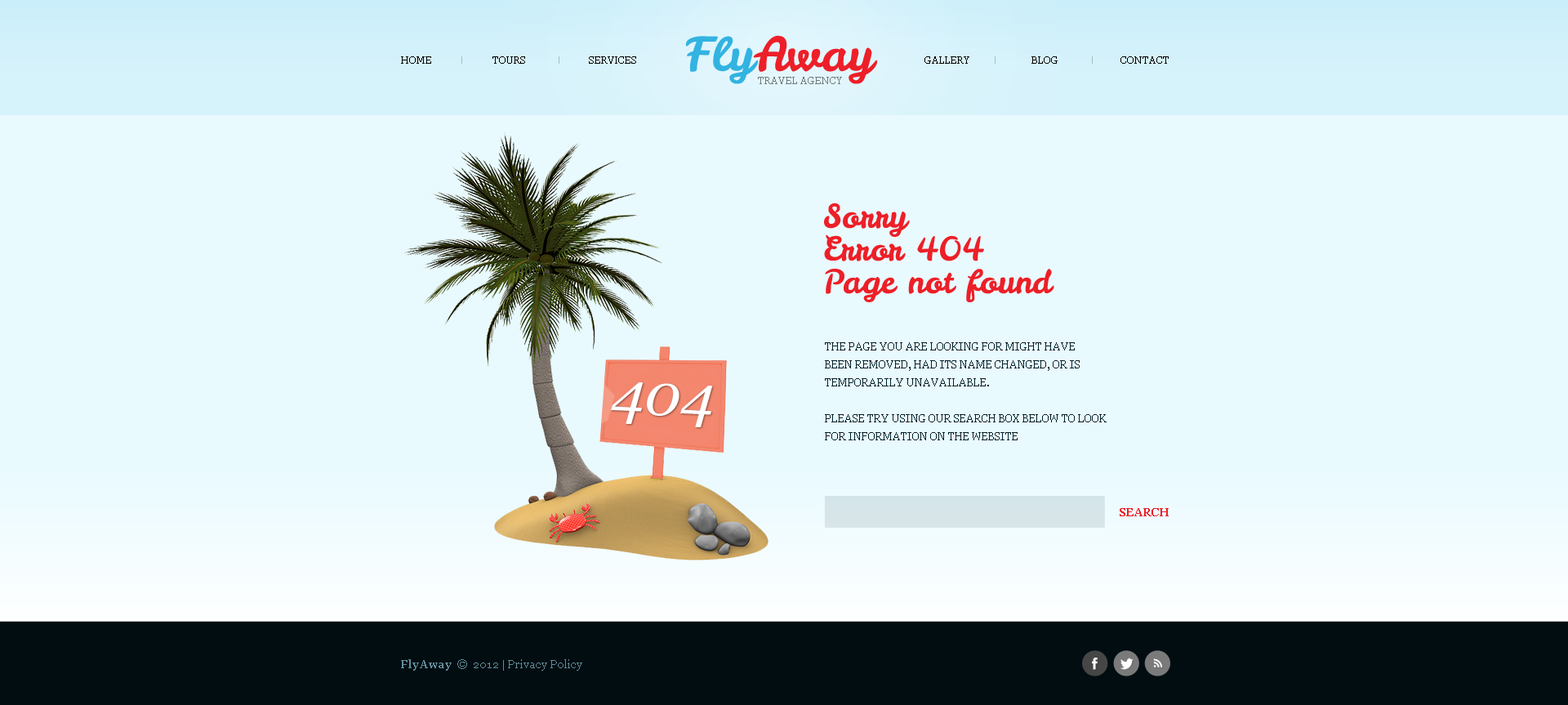
<style>
.page{position:relative;width:1568px;height:705px;background:#e9faff}
.page>*{position:absolute;margin:0}
.t1{font:46.5px "LeckerliOne";color:#ed1f28}
.t2{font:46.5px "LeckerliOne";color:#32b3e1}
.t3{font:9.8px "Georgia";color:#000000;text-transform:uppercase}
.t4{font:9.8px "Georgia";color:#717b7e;text-transform:uppercase}
.t5{font:32.7px/32.7px "LeckerliOne-Regular";color:#ed1f27}
.t6{font:10.6px/18px "Georgia";color:#022029;text-transform:uppercase}
.t7{font:58.8px "Georgia-Italic";color:#ffffff}
.t8{font:10.6px "Georgia-Bold";color:#ed1f27;text-transform:uppercase}
.t9{font:11.4px "Georgia";color:#608e9d}
.t10{font:11.4px "Georgia-Bold";color:#608e9d}
</style>
<div class="page">
<p class="t1" style="left:685px;top:35px;width:192px;height:49px"><span class="t2">Fly</span>Away</p>
<p class="t3" style="left:401px;top:56px;width:30px;height:8px">home</p>
<p class="t3" style="left:492px;top:56px;width:33px;height:8px">tours</p>
<p class="t3" style="left:589px;top:56px;width:47px;height:8px">services</p>
<p class="t3" style="left:924px;top:56px;width:45px;height:8px">gallery</p>
<p class="t3" style="left:1031px;top:56px;width:27px;height:8px">blog</p>
<p class="t3" style="left:1120px;top:56px;width:49px;height:8px">contact</p>
<p class="t4" style="left:758px;top:77px;width:84px;height:7px">travel agency</p>
<p class="t5" style="left:824px;top:203px;width:230px;height:99px">Sorry<br>Error 404<br>Page not found</p>
<p class="t6" style="left:825px;top:342px;width:282px;height:98px">The page you are looking for might have <br>been removed, had its name changed, or is <br>temporarily unavailable.<br><br>Please try using our search box below to look for information on the website</p>
<p class="t7" style="left:611px;top:382px;width:102px;height:45px;rotate:3deg">404</p>
<p class="t8" style="left:1120px;top:508px;width:49px;height:8px">search</p>
<p class="t9" style="left:401px;top:659px;width:181px;height:11px"><span class="t10">FlyAway</span>  ©  2012 | Privacy Policy</p>
</div>
